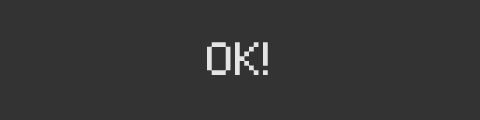
<style>
.page{position:relative;width:480px;height:120px;background:#333333}
.page>*{position:absolute;margin:0}
.t1{font:48px "Tandysoft";color:#e4e4e4}
</style>
<div class="page">
<p class="t1" style="left:207px;top:42px;width:61px;height:33px">OK!</p>
</div>
